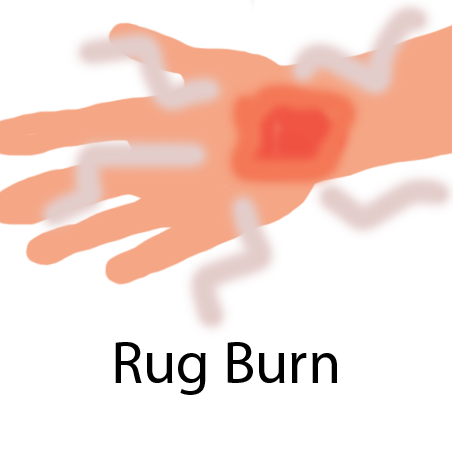
<style>
.page{position:relative;width:453px;height:452px;background:#ffffff}
.page>*{position:absolute;margin:0}
.t1{font:60px "MyriadPro-Regular";color:#010101}
</style>
<div class="page">
<p class="t1" style="left:115px;top:342px;width:222px;height:53px">Rug Burn</p>
</div>
